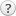
<style>
.page{position:relative;width:16px;height:16px}
.page>*{position:absolute;margin:0}
.t1{font:12.5px "Tahoma";color:#505050}
</style>
<div class="page">
<p class="t1" style="left:5px;top:4px;width:7px;height:9px">?</p>
</div>
